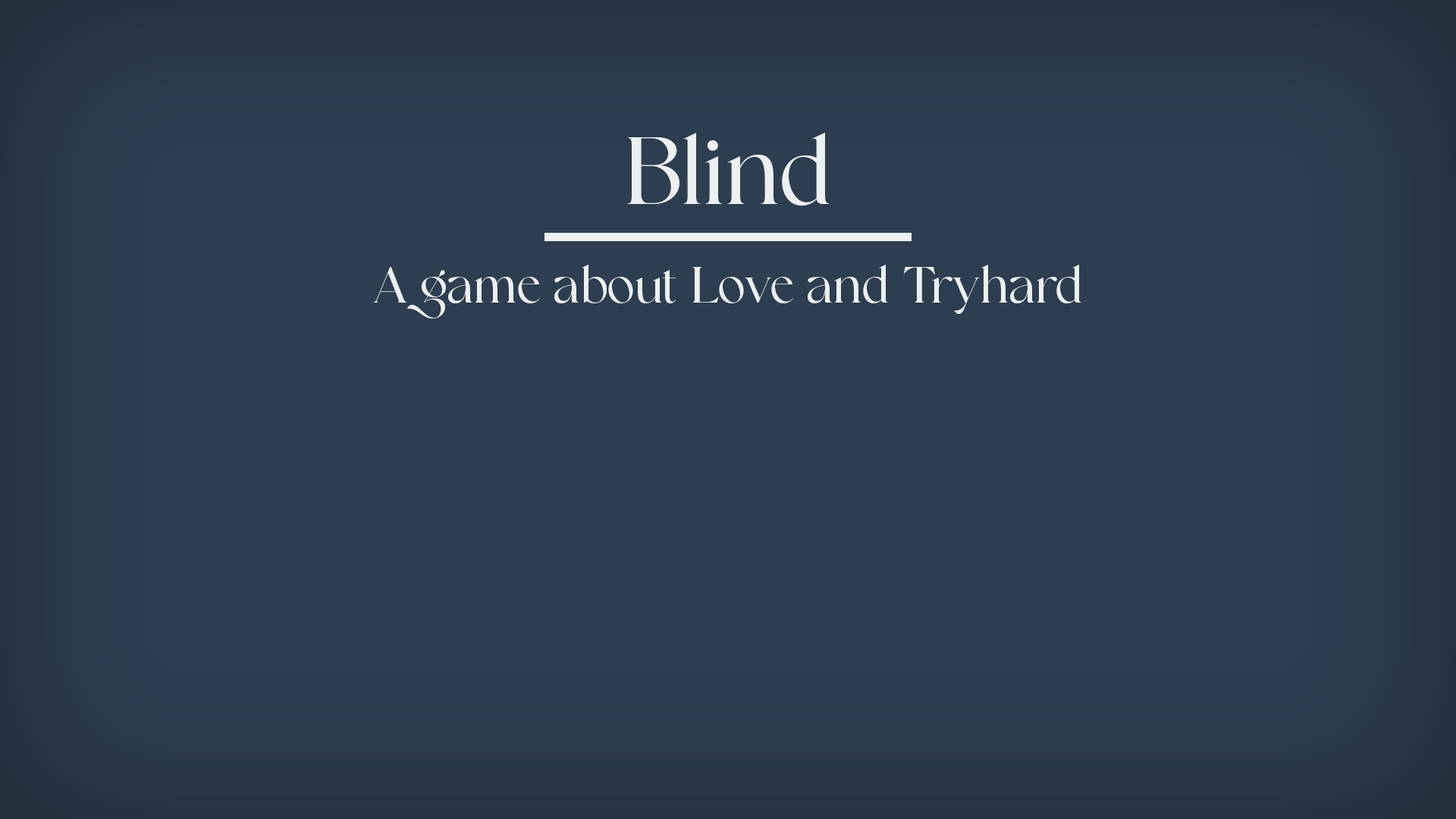
<style>
.page{position:relative;width:1456px;height:819px;background:#2c3e50}
.page>*{position:absolute;margin:0}
.t1{font:50.6px "BelganAesthetic-Regular";color:#ecf0f1}
.t2{font:94.8px "BelganAesthetic-Regular";color:#ecf0f1}
.t3{font:31.6px "BelganAesthetic-Regular";color:#ecf0f1;text-decoration:underline}
</style>
<div class="page">
<p class="t1" style="left:373px;top:132px;width:708px;height:186px;text-align:center"><span class="t2">Blind<br></span><span class="t3"><br></span>A game about Love and Tryhard</p>
</div>
